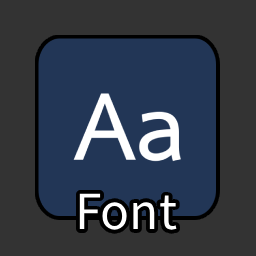
<style>
.page{position:relative;width:256px;height:256px;background:#333333}
.page>*{position:absolute;margin:0}
.t1{font:48px "NotoSansKR-Regular";color:#ffffff}
</style>
<div class="page">
<p class="t1" style="left:79px;top:193px;width:98px;height:37px">Font</p>
</div>
